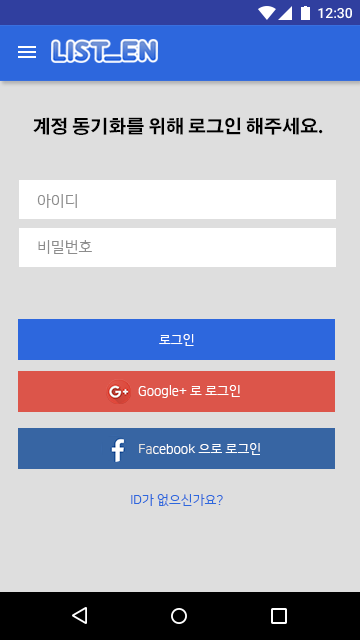
<style>
.page{position:relative;width:360px;height:640px;background:#dedede}
.page>*{position:absolute;margin:0}
.t1{font:18px "AdobeGothicStd-Bold";color:#000000}
.t2{font:15.2px "NanumSquareR";color:#8d8d8d}
.t3{font:13px "NanumSquareR";color:#ffffff}
.t4{font:13px "NanumSquareR";color:#dedede}
.t5{font:13px "NanumSquareR";color:#2d67dd}
</style>
<div class="page">
<p class="t1" style="left:33px;top:117px;width:290px;height:18px">계정 동기화를 위해 로그인 해주세요.</p>
<p class="t2" style="left:37px;top:194px;width:40px;height:14px">아이디</p>
<p class="t2" style="left:38px;top:240px;width:54px;height:14px">비밀번호</p>
<p class="t3" style="left:159px;top:334px;width:35px;height:12px">로그인</p>
<p class="t3" style="left:138px;top:385px;width:102px;height:13px">Google+ 로 로그인</p>
<p class="t3" style="left:139px;top:443px;width:121px;height:12px"><span class="t4">Fa</span>cebook 으로 로그인</p>
<p class="t5" style="left:131px;top:494px;width:92px;height:12px">ID가 없으신가요?</p>
</div>
